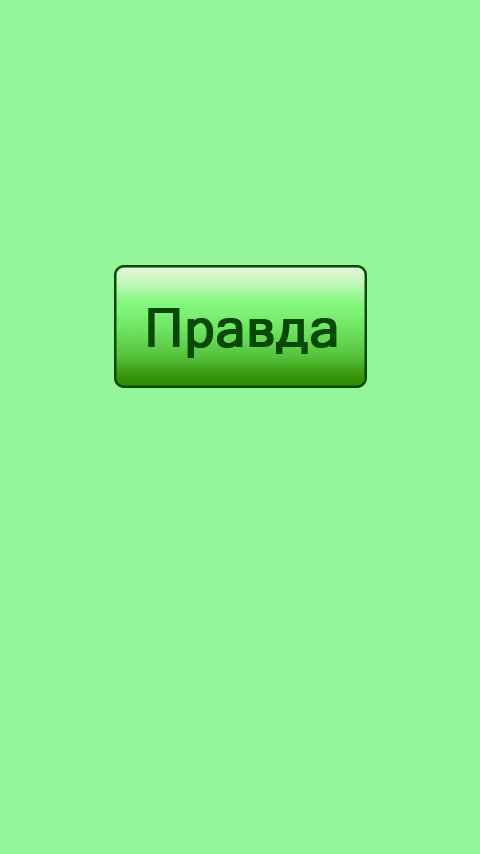
<style>
.page{position:relative;width:480px;height:854px;background:#95f59a}
.page>*{position:absolute;margin:0}
.t1{font:53.5px "MicrosoftSansSerif";color:#084a05;font-weight:bold}
</style>
<div class="page">
<p class="t1" style="left:148px;top:308px;width:189px;height:50px">Правда</p>
</div>
